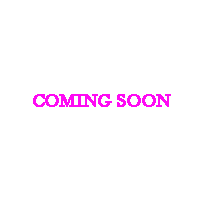
<style>
.page{position:relative;width:200px;height:200px;background:#ffffff}
.page>*{position:absolute;margin:0}
.t1{font:18.3px "BaskOldFace";letter-spacing:-0.01em;color:#ff0af4;text-transform:uppercase;font-weight:bold}
</style>
<div class="page">
<p class="t1" style="left:33px;top:94px;width:138px;height:13px">Coming soon</p>
</div>
